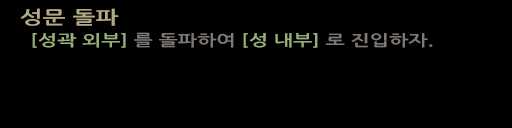
<style>
.page{position:relative;width:512px;height:128px;background:#000000}
.page>*{position:absolute;margin:0}
.t1{font:18px "NanumGothicBold";color:#b4aa86;scale:1.36 1}
.t2{font:15.4px "NanumGothicBold";color:#96af7b;scale:1.33 1}
.t3{font:15.4px "NanumGothicBold";color:#7e7974;scale:1.33 1}
</style>
<div class="page">
<p class="t1" style="left:20px;top:8px;width:99px;height:18px">성문 돌파</p>
<p class="t2" style="left:32px;top:32px;width:401px;height:16px">[성곽 외부] <span class="t3">를 돌파하여 </span>[성 내부] <span class="t3">로 진입하자.</span></p>
</div>
